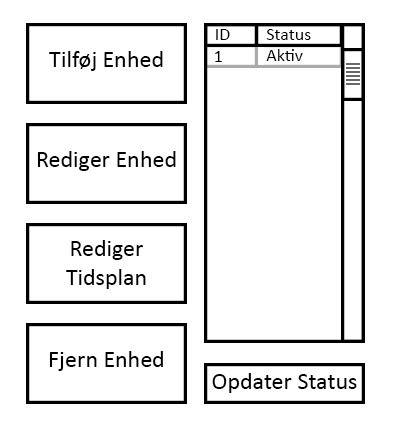
<style>
.page{position:relative;width:398px;height:428px;background:#ffffff}
.page>*{position:absolute;margin:0}
.t1{font:18px "Calibri";color:#000000}
.t2{font:24px "Calibri";color:#000000}
</style>
<div class="page">
<p class="t1" style="left:216px;top:29px;width:14px;height:11px">ID</p>
<p class="t1" style="left:266px;top:29px;width:45px;height:11px">Status</p>
<p class="t2" style="left:49px;top:51px;width:114px;height:20px">Tilføj Enhed</p>
<p class="t1" style="left:215px;top:51px;width:7px;height:11px">1</p>
<p class="t1" style="left:266px;top:49px;width:37px;height:12px">Aktiv</p>
<p class="t2" style="left:37px;top:151px;width:139px;height:20px">Rediger Enhed</p>
<p class="t2" style="left:66px;top:240px;width:80px;height:49px;text-align:center">Rediger<br>Tidsplan</p>
<p class="t2" style="left:49px;top:351px;width:114px;height:20px">Fjern Enhed</p>
<p class="t2" style="left:212px;top:373px;width:145px;height:20px">Opdater Status</p>
</div>
